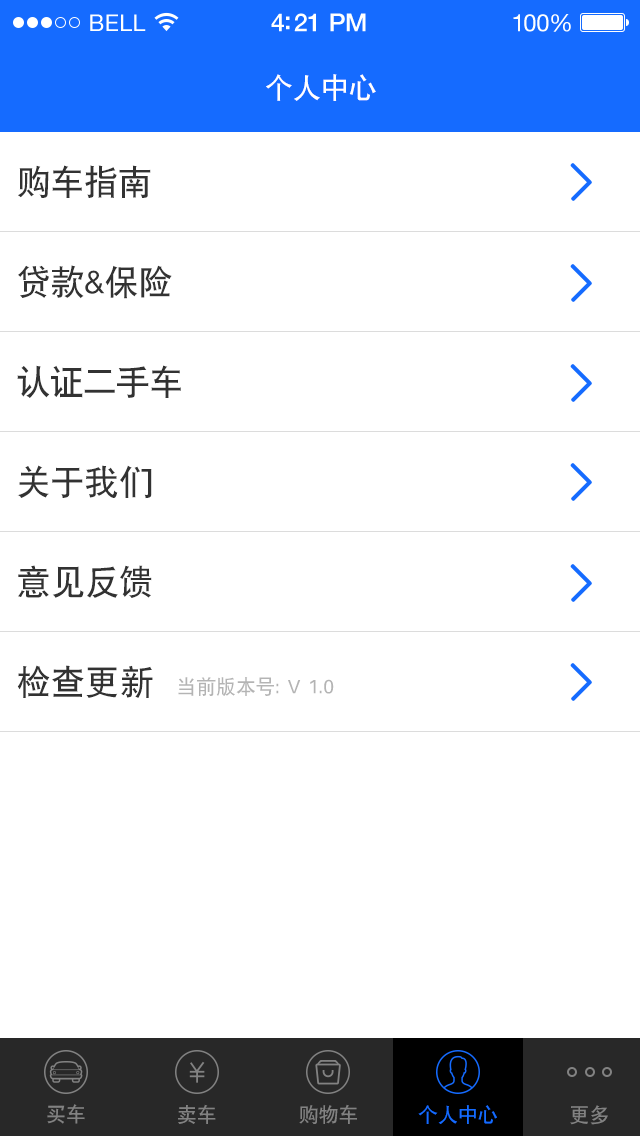
<style>
.page{position:relative;width:640px;height:1136px;background:#ffffff}
.page>*{position:absolute;margin:0}
.t1{font:28px "SIL-Hei-Med-Jian";color:#ffffff}
.t2{font:34px/100px "SIL-Hei-Med-Jian";color:#323232}
.t3{font:20px/100px "SIL-Hei-Med-Jian";color:#b4b4b4}
.t4{font:20px "SIL-Hei-Med-Jian";color:#828282}
.t5{font:20px "SIL-Hei-Med-Jian";color:#156bff}
</style>
<div class="page">
<p class="t1" style="left:266px;top:74px;width:110px;height:27px">个人中心</p>
<p class="t2" style="left:17px;top:165px;width:317px;height:533px">购车指南<br>贷款&amp;保险<br>认证二手车<br>关于我们<br>意见反馈<br>检查更新  <span class="t3">当前版本号：V 1.0</span></p>
<p class="t4" style="left:47px;top:1104px;width:38px;height:20px">买车</p>
<p class="t4" style="left:178px;top:1104px;width:38px;height:20px">卖车</p>
<p class="t4" style="left:299px;top:1104px;width:58px;height:20px">购物车</p>
<p class="t5" style="left:418px;top:1105px;width:79px;height:19px">个人中心</p>
<p class="t4" style="left:570px;top:1105px;width:38px;height:20px">更多</p>
</div>
